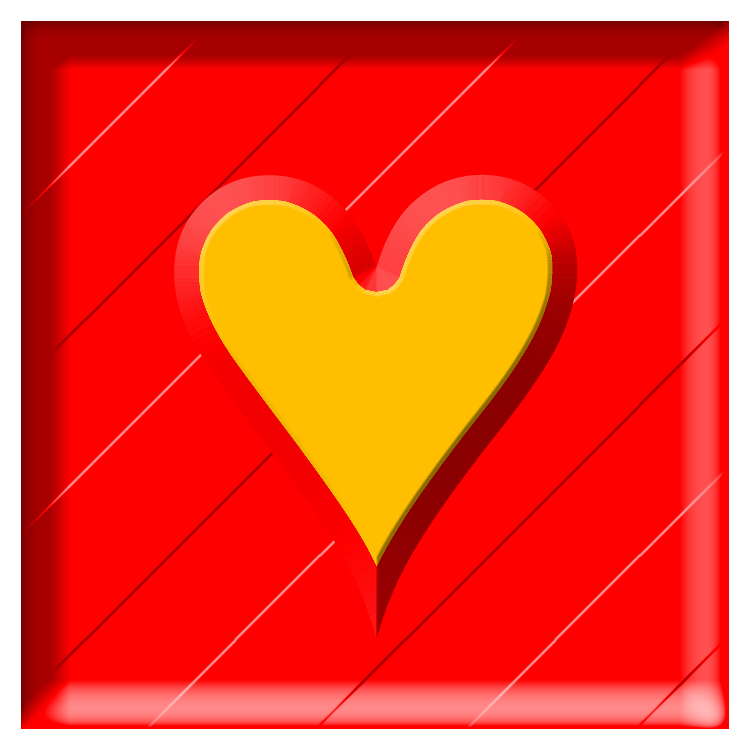
<style>
.page{position:relative;width:750px;height:750px;background:#ff0000}
.page>*{position:absolute;margin:0}
.t1{font:756.9px "ArialMT"}
</style>
<div class="page">
<p class="t1" style="left:174px;top:174px;width:404px;height:465px">♥</p>
</div>
